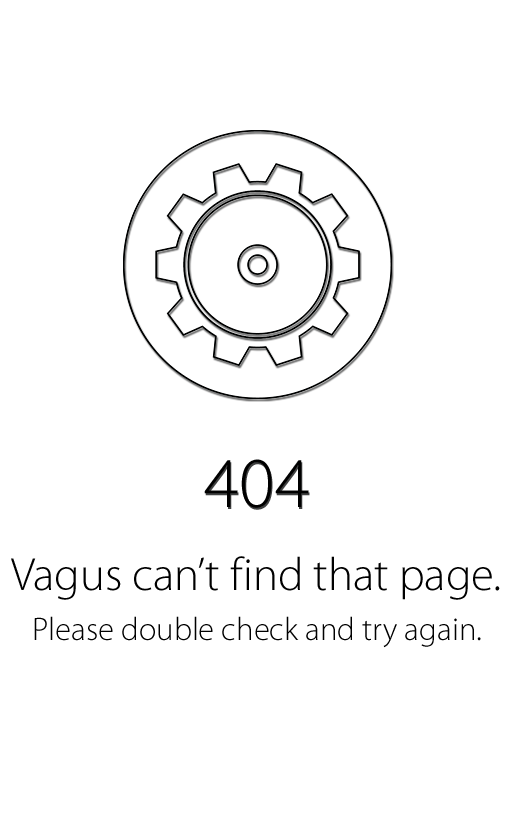
<style>
.page{position:relative;width:512px;height:826px;background:#ffffff}
.page>*{position:absolute;margin:0}
.t1{font:71.8px "MyriadPro-Light";color:#000000}
.t2{font:46.7px "MyriadPro-Light";color:#000000}
.t3{font:32.7px "MyriadPro-Light";color:#000000}
</style>
<div class="page">
<p class="t1" style="left:204px;top:459px;width:105px;height:49px">404</p>
<p class="t2" style="left:11px;top:556px;width:489px;height:44px">Vagus can’t f ind that page.</p>
<p class="t3" style="left:34px;top:616px;width:447px;height:32px">Please double check and try again.</p>
</div>
